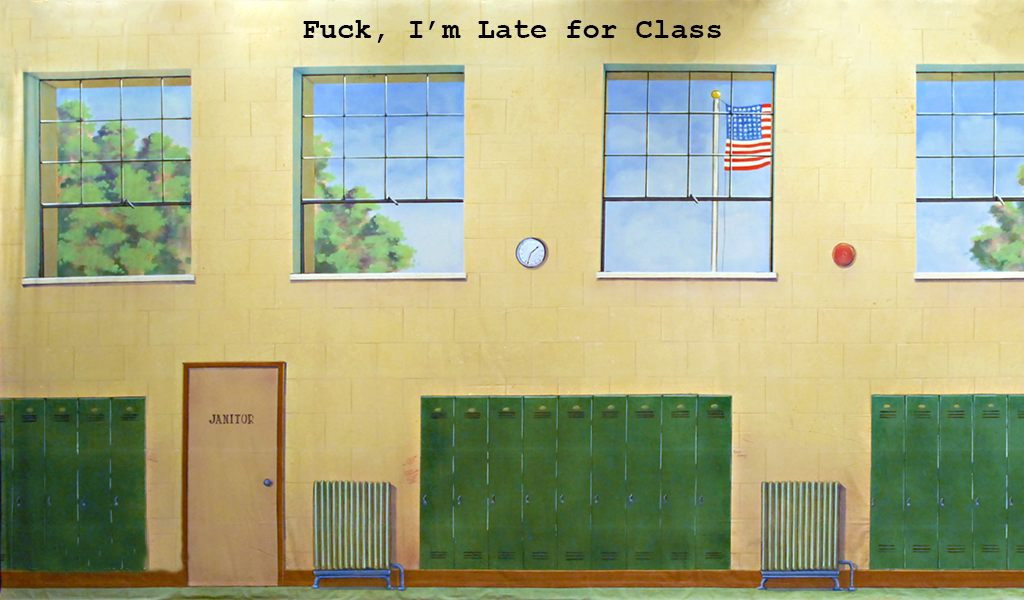
<style>
.page{position:relative;width:1024px;height:600px}
.page>*{position:absolute;margin:0}
.t1{font:29.3px "CourierNewPS-BoldMT";color:#000000}
</style>
<div class="page">
<p class="t1" style="left:303px;top:20px;width:418px;height:23px">Fuck, I’m Late for Class</p>
</div>
